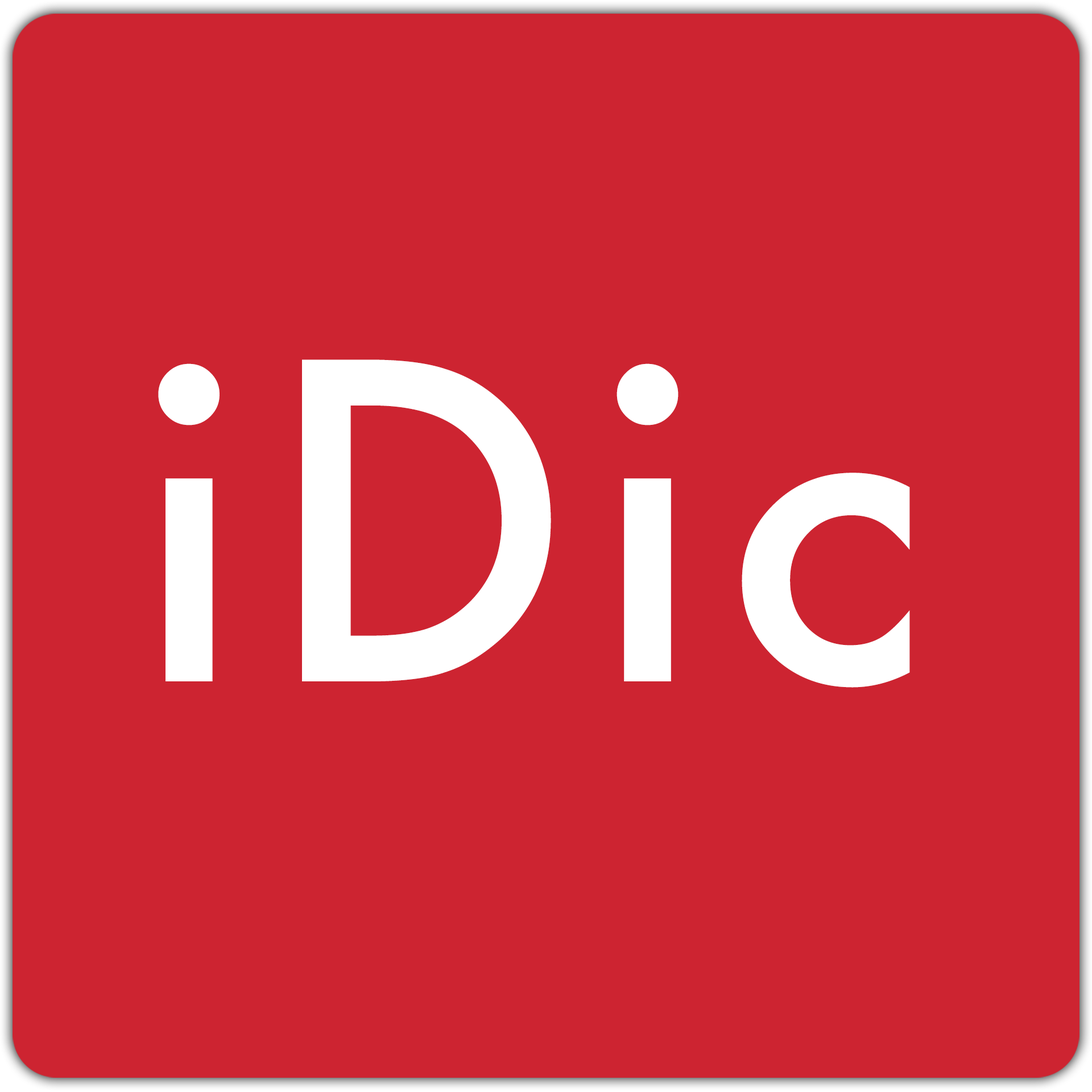
<style>
.page{position:relative;width:1092px;height:1092px;background:#cd2431}
.page>*{position:absolute;margin:0}
.t1{font:426.6px "Futura-Medium";letter-spacing:0.05em;color:#ffffff}
</style>
<div class="page">
<p class="t1" style="left:158px;top:359px;width:752px;height:329px">iDic</p>
</div>
